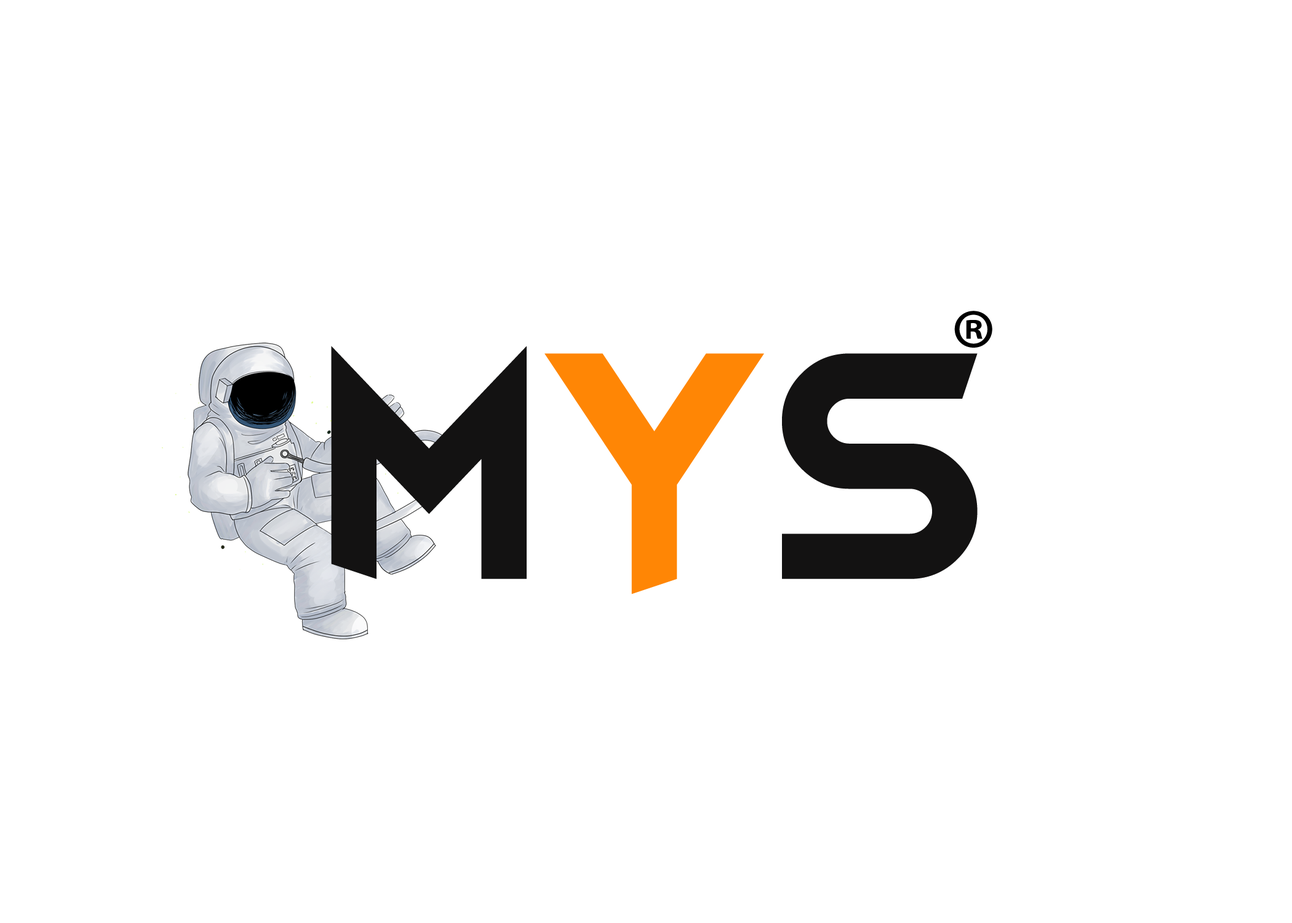
<style>
.page{position:relative;width:1292px;height:923px;background:#ffffff}
.page>*{position:absolute;margin:0}
.t1{font:110.7px "MyriadPro-Regular";color:#000000}
.t2{font:307.6px "Skygraze";color:#131212}
.t3{font:307.6px "Skygraze";color:#ff8605}
</style>
<div class="page">
<p class="t1" style="left:954px;top:311px;width:38px;height:37px">®</p>
<p class="t2" style="left:331px;top:346px;width:647px;height:248px">M<span class="t3">Y</span>S</p>
</div>
